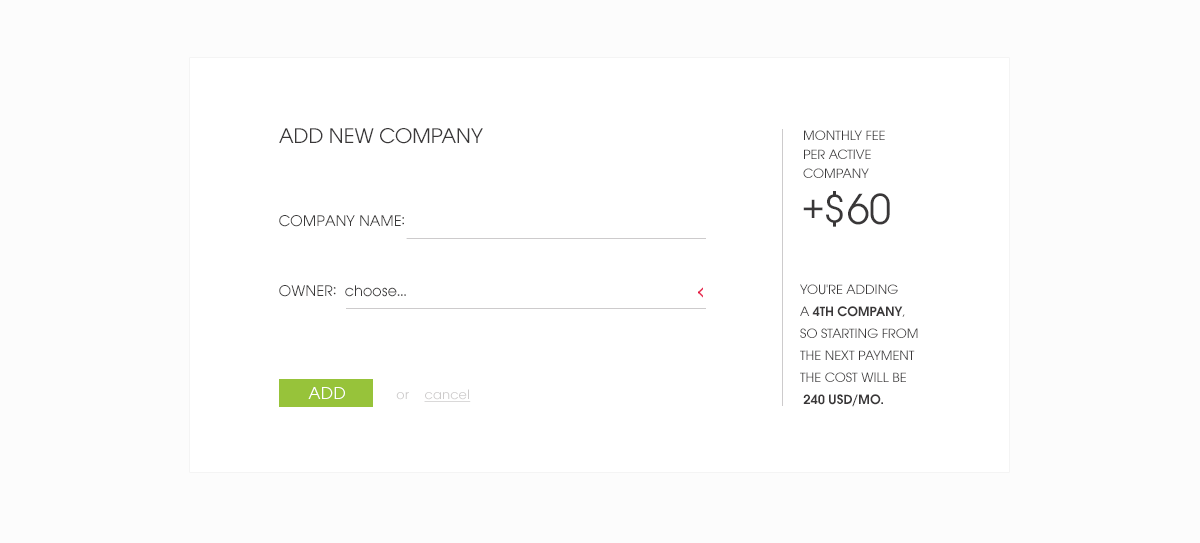
<style>
.page{position:relative;width:1200px;height:543px;background:#ffffff}
.page>*{position:absolute;margin:0}
.t1{font:22px "AvignonBook3";color:#393738}
.t2{font:14px/4.8px "AvignonBook3";color:#393738}
.t3{font:45px "AvignonBook3";color:#393738}
.t4{font:16px "AvignonBook3";color:#393838}
.t5{font:14px/22px "AvignonBook3";color:#393738;text-transform:uppercase}
.t6{font:36px/4.8px "AvignonBook3";color:#393738}
.t7{font:14px/22px "AvignonDemi";color:#393738;text-transform:uppercase}
.t8{font:18px "AvignonBook3";letter-spacing:0.025em;color:#ffffff}
.t9{font:14px "AvignonBook3";letter-spacing:0.025em;color:#cdcbcb;text-decoration:underline}
.t10{font:14px "AvignonBook3";letter-spacing:0.025em;color:#cdcbcb}
</style>
<div class="page">
<p class="t1" style="left:279px;top:128px;width:204px;height:16px">ADD NEW COMPANY</p>
<p class="t2" style="left:803px;top:130px;width:82px;height:48px">MONTHLY FEE <br><br><br><br>PER ACTIVE <br><br><br><br>COMPANY</p>
<p class="t3" style="left:803px;top:191px;width:87px;height:36px">+$60</p>
<p class="t4" style="left:279px;top:215px;width:125px;height:12px">COMPANY NAME:</p>
<p class="t4" style="left:279px;top:285px;width:57px;height:12px">OWNER:</p>
<p class="t4" style="left:345px;top:285px;width:61px;height:12px">choose...</p>
<p class="t5" style="left:800px;top:284px;width:118px;height:123px"><span class="t6"><br> <br></span>You're adding <br>a <span class="t7">4th company</span>, <br>so starting from<br>the next payment <br>the cost will be <br> <span class="t7">240 USD/mo.</span></p>
<p class="t8" style="left:308px;top:387px;width:37px;height:12px">ADD</p>
<p class="t9" style="left:396px;top:389px;width:75px;height:13px"><span class="t10">or    </span>cancel</p>
</div>
